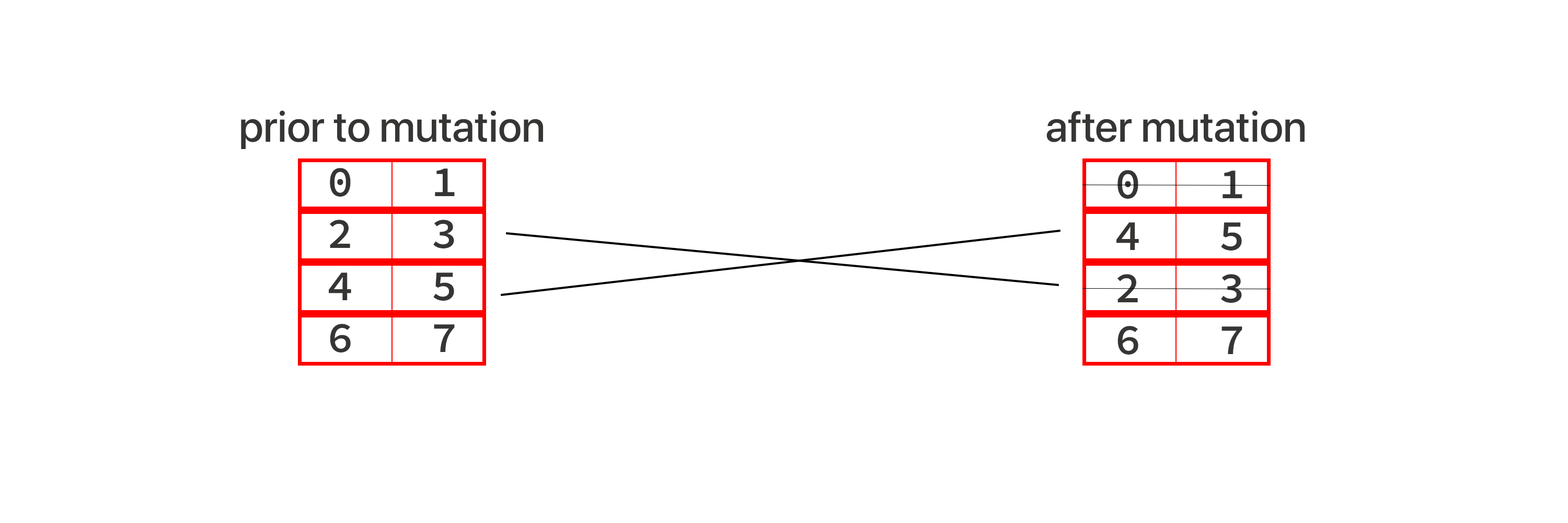
<style>
.page{position:relative;width:1568px;height:523px;background:#ffffff}
.page>*{position:absolute;margin:0}
.t1{font:43.3px "SFProDisplay-Medium";color:#363534}
.t2{font:43.3px "SourceCodeRoman-Semibold";color:#363534}
</style>
<div class="page">
<p class="t1" style="left:241px;top:110px;width:302px;height:39px">prior to mutation</p>
<p class="t1" style="left:1046px;top:110px;width:259px;height:32px">after mutation</p>
<p class="t2" style="left:329px;top:168px;width:126px;height:184px;text-align:center">0   1<br>2   3<br>4   5<br>6   7</p>
<p class="t2" style="left:1116px;top:170px;width:126px;height:184px;text-align:center">0   1<br>4   5<br>2   3<br>6   7</p>
</div>
